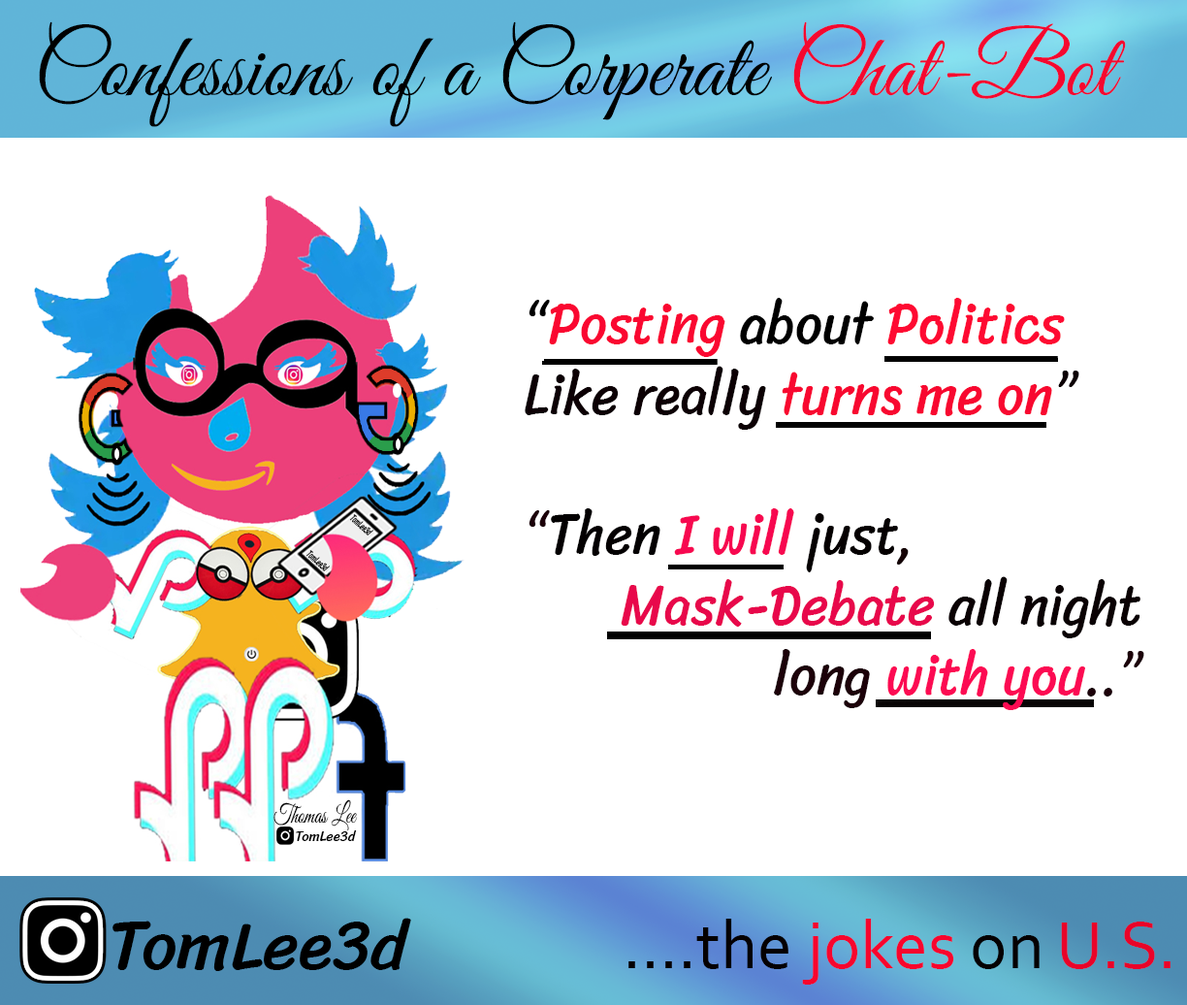
<style>
.page{position:relative;width:1187px;height:1005px;background:#ffffff}
.page>*{position:absolute;margin:0}
.t1{font:90.9px "GreatVibes-Regular";color:#000000}
.t2{font:90.9px "GreatVibes-Regular";color:#f5082f}
.t3{font:58.5px "Sriracha-Regular";color:#0c0004;scale:0.91 1}
.t4{font:58.5px "Sriracha-Regular";color:#000000;scale:0.91 1}
.t5{font:58.5px "Sriracha-Regular";color:#fa0831;scale:0.91 1}
.t6{font:58.5px "Sriracha-Regular";color:#fe0a32;scale:0.91 1}
.t7{font:58.5px "Sriracha-Regular";color:#f80830;scale:0.91 1}
.t8{font:58.5px "Sriracha-Regular";color:#1c0109;scale:0.91 1}
.t9{font:58.5px "Sriracha-Regular";color:#030001;scale:0.91 1}
.t10{font:58.5px "Sriracha-Regular";color:#f70850;scale:0.91 1}
.t11{font:58.5px "Sriracha-Regular";color:#050001;scale:0.91 1}
.t12{font:58.5px "Sriracha-Regular";color:#140104;scale:0.91 1}
.t13{font:58.5px "Sriracha-Regular";color:#e8084b;scale:0.91 1}
.t14{font:58.5px "Sriracha-Regular";color:#0a0103;scale:0.91 1}
.t15{font:58.5px "Sriracha-Regular";color:#fc0b53;scale:0.91 1}
.t16{font:10.5px "Sriracha-Regular";color:#000000;scale:0.56 1}
.t17{font:26.4px "GreatVibes-Regular";color:#000000;scale:0.75 1}
.t18{font:14.6px "Sriracha-Regular";color:#000000;scale:0.96 1}
.t19{font:69.8px "Sriracha-Regular";color:#000000}
.t20{font:69.8px "Corbel";color:#050001}
.t21{font:69.8px "Corbel";color:#f8052d}
.t22{font:69.8px "Corbel";color:#e90329}
</style>
<div class="page">
<p class="t1" style="left:39px;top:21px;width:1087px;height:106px">Confessions of a Corperate <span class="t2">Chat-Bot</span></p>
<p class="t3" style="left:525px;top:298px;width:619px;height:412px"><span class="t4">“</span><span class="t5">Posting</span><span class="t4"> about </span><span class="t6">Politics<br></span>Like really <span class="t7">turns me on</span>”<br><br><span class="t8">“</span><span class="t9">Then</span><span class="t10"> I will </span><span class="t11">just</span><span class="t12">,<br>      </span><span class="t13"> Mask-Debate </span><span class="t14">all night</span><span class="t8">                     long </span><span class="t15">with you</span><span class="t8">..”</span></p>
<p class="t16" style="left:349px;top:514px;width:25px;height:21px;rotate:42deg">TomLee3d</p>
<p class="t16" style="left:305px;top:550px;width:26px;height:21px;rotate:42deg">TomLee3d</p>
<p class="t17" style="left:273px;top:799px;width:85px;height:32px">Thomas Lee</p>
<p class="t18" style="left:296px;top:830px;width:61px;height:11px">TomLee3d</p>
<p class="t19" style="left:112px;top:917px;width:299px;height:54px">TomLee3d</p>
<p class="t20" style="left:628px;top:918px;width:542px;height:66px">....the <span class="t21">jokes</span> on <span class="t22">U.S.</span></p>
</div>
